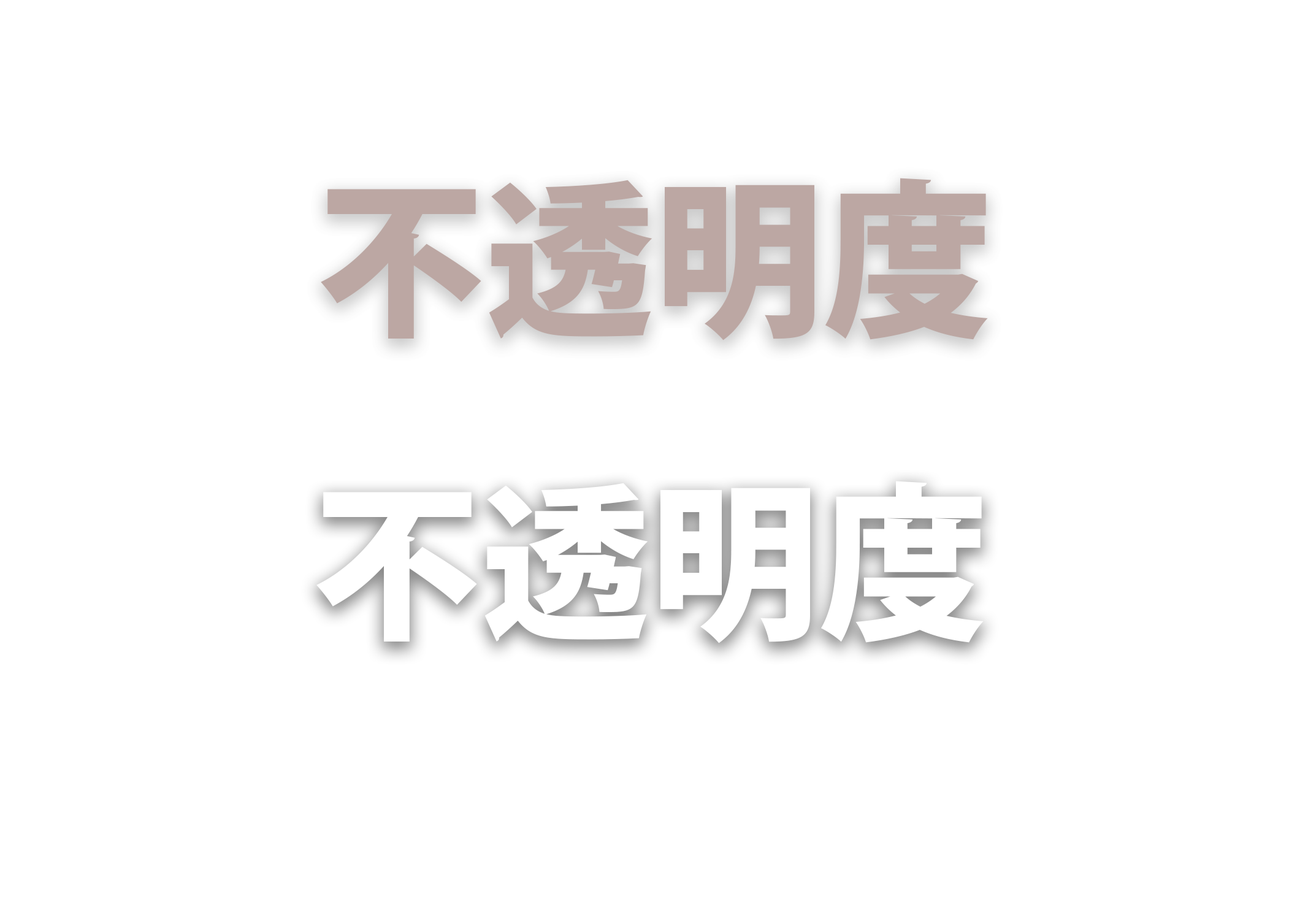
<style>
.page{position:relative;width:1308px;height:912px;background:#ffffff}
.page>*{position:absolute;margin:0}
.t1{font:168.6px "KozGoPr6N-Heavy";color:#bca7a3}
.t2{font:168.6px "KozGoPr6N-Heavy";color:#ffffff}
</style>
<div class="page">
<p class="t1" style="left:321px;top:178px;width:667px;height:162px">不透明度</p>
<p class="t2" style="left:316px;top:481px;width:667px;height:162px">不透明度</p>
</div>
